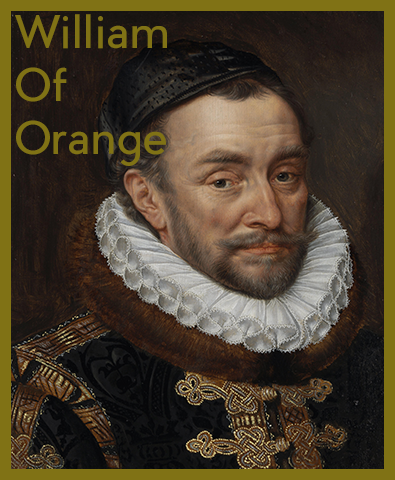
<style>
.page{position:relative;width:395px;height:480px}
.page>*{position:absolute;margin:0}
.t1{font:44px "PierSans";color:#807215}
</style>
<div class="page">
<p class="t1" style="left:15px;top:14px;width:152px;height:152px">William<br>Of<br>Orange</p>
</div>
